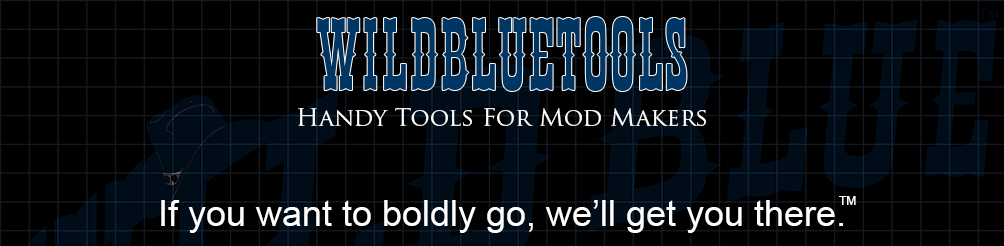
<style>
.page{position:relative;width:1004px;height:246px;background:#000000}
.page>*{position:absolute;margin:0}
.t1{font:24px "TrajanPro-Regular";color:#ffffff}
.t2{font:12px "ArialMT";color:#ffffff}
.t3{font:36px "ArialMT";color:#ffffff}
</style>
<div class="page">
<p class="t1" style="left:298px;top:107px;width:408px;height:20px">Handy Tools For Mod Makers</p>
<p class="t2" style="left:839px;top:196px;width:17px;height:9px">TM</p>
<p class="t3" style="left:161px;top:200px;width:682px;height:33px">If you want to boldly go, we’ll get you there.</p>
</div>
